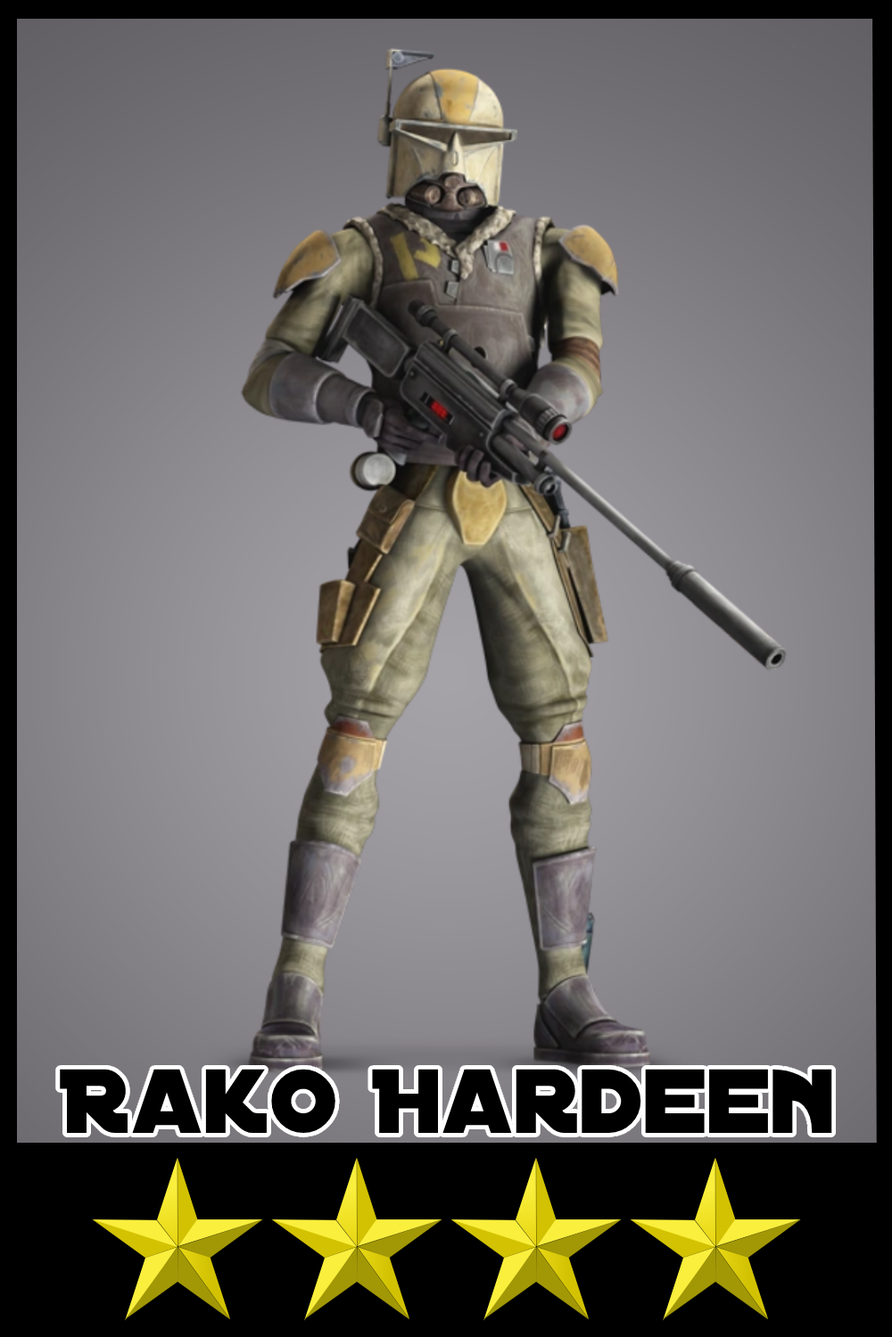
<style>
.page{position:relative;width:892px;height:1337px}
.page>*{position:absolute;margin:0}
.t1{font:97.9px "DistantGalaxy";color:#000000}
</style>
<div class="page">
<p class="t1" style="left:60px;top:1069px;width:772px;height:64px">Rako Hardeen</p>
</div>
